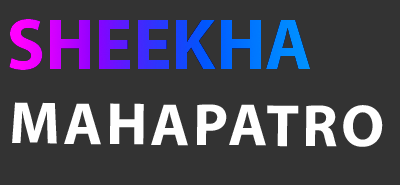
<style>
.page{position:relative;width:400px;height:185px;background:#333333}
.page>*{position:absolute;margin:0}
.t1{font:72px "MyriadPro-Bold"}
.t2{font:60px "MyriadPro-Bold";color:#ffffff}
</style>
<div class="page">
<p class="t1" style="left:9px;top:19px;width:302px;height:51px">SHEEKHA</p>
<p class="t2" style="left:12px;top:102px;width:371px;height:45px;rotate:1deg">MAHAPATRO</p>
</div>
